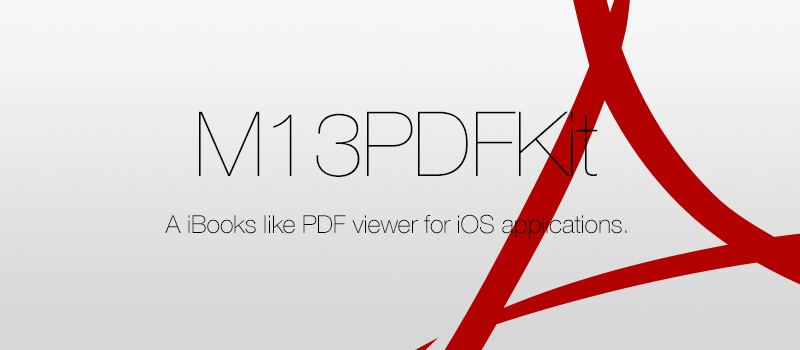
<style>
.page{position:relative;width:800px;height:350px}
.page>*{position:absolute;margin:0}
.t1{font:90px "HelveticaNeue-UltraLight";letter-spacing:-0.007em;color:#000000}
.t2{font:25px "HelveticaNeue-Thin";letter-spacing:-0.007em;color:#000000}
</style>
<div class="page">
<p class="t1" style="left:199px;top:111px;width:399px;height:66px">M13PDFKit</p>
<p class="t2" style="left:165px;top:214px;width:462px;height:24px">A iBooks like PDF viewer for iOS applications.</p>
</div>
